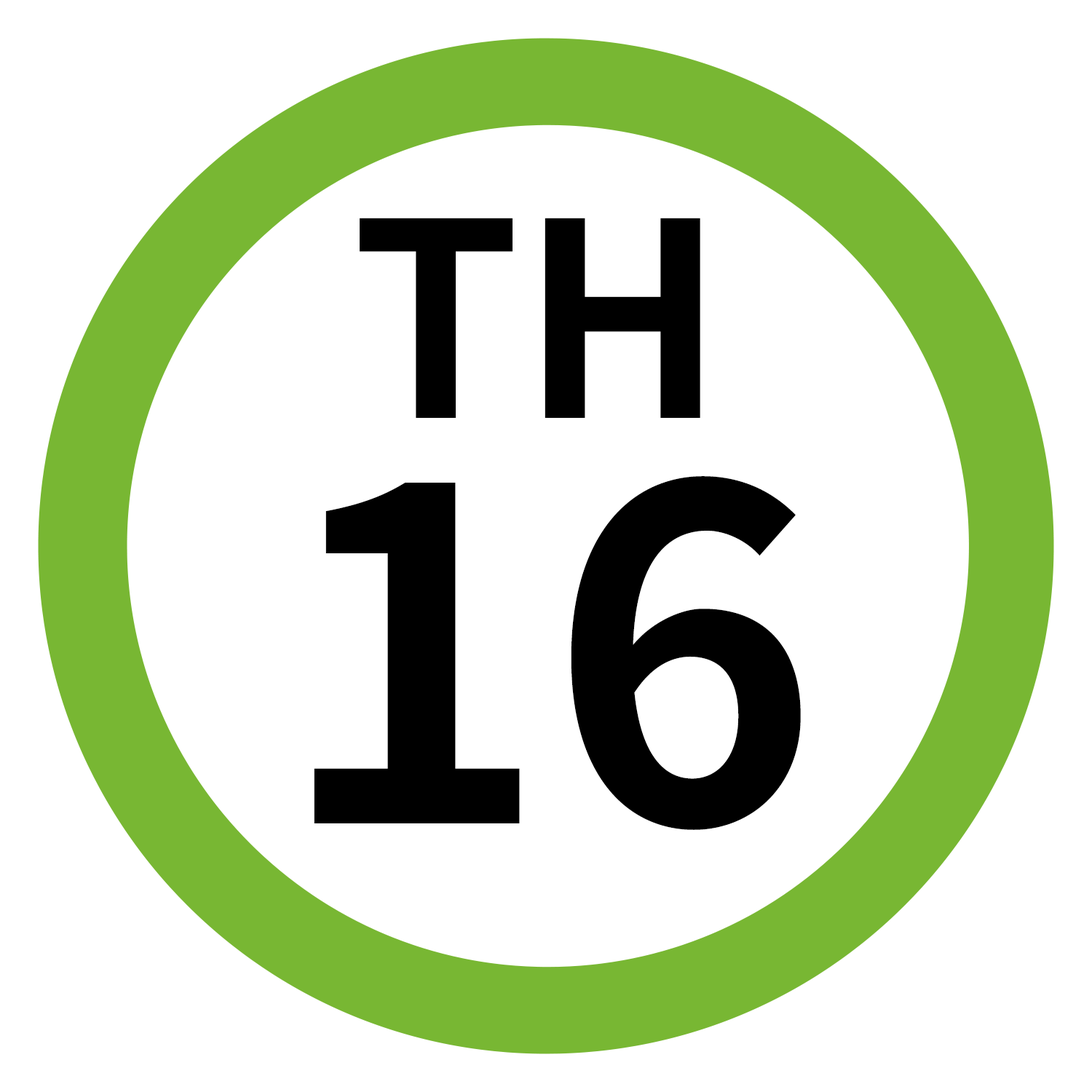
<style>
.page{position:relative;width:1092px;height:1092px;background:#ffffff}
.page>*{position:absolute;margin:0}
.t1{font:269.8px "NotoSansJP-Bold";color:#000000}
.t2{font:460.5px "NotoSansJP-Bold";color:#000000}
</style>
<div class="page">
<p class="t1" style="left:360px;top:218px;width:340px;height:200px">TH</p>
<p class="t2" style="left:314px;top:476px;width:487px;height:354px">16</p>
</div>
